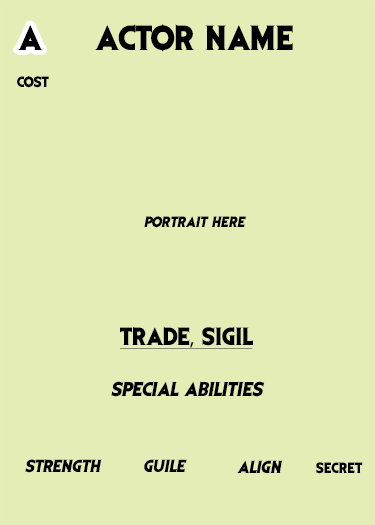
<style>
.page{position:relative;width:375px;height:525px;background:#e3edb5}
.page>*{position:absolute;margin:0}
.t1{font:29.2px "EvilDead";color:#000000}
.t2{font:12.5px "EvilDead";color:#000000}
.t3{font:12.5px "EvilDead";color:#000000;font-style:italic}
.t4{font:20.8px "EvilDead";color:#000000;text-decoration:underline}
.t5{font:20.8px "MyriadPro-Regular";color:#000000;text-decoration:underline}
.t6{font:16.7px "EvilDead";color:#000000;font-style:italic}
.t7{font:14.6px "EvilDead";color:#000000;font-style:italic}
</style>
<div class="page">
<p class="t1" style="left:17px;top:25px;width:26px;height:25px">A</p>
<p class="t1" style="left:94px;top:24px;width:199px;height:28px">ACTOR Name</p>
<p class="t2" style="left:17px;top:76px;width:32px;height:12px">cost</p>
<p class="t3" style="left:144px;top:216px;width:102px;height:12px">PORTRAIT HERE</p>
<p class="t4" style="left:120px;top:326px;width:133px;height:23px">TRADE<span class="t5">,</span> SIGIL</p>
<p class="t6" style="left:111px;top:381px;width:154px;height:16px">Special ABILITIES</p>
<p class="t7" style="left:25px;top:459px;width:77px;height:14px">Strength</p>
<p class="t7" style="left:144px;top:459px;width:43px;height:13px">GUILE</p>
<p class="t7" style="left:237px;top:460px;width:46px;height:13px">ALIGN</p>
<p class="t2" style="left:316px;top:461px;width:47px;height:13px">SECRET</p>
</div>
